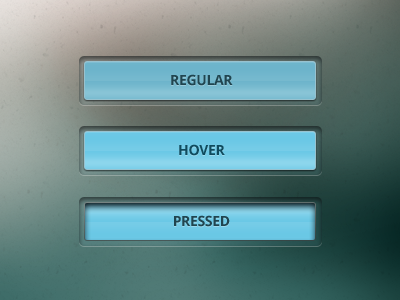
<style>
.page{position:relative;width:400px;height:300px}
.page>*{position:absolute;margin:0}
.t1{font:14px "OpenSans-Bold";letter-spacing:-0.025em;color:#204550;text-transform:uppercase}
.t2{font:14px "OpenSans-Bold";letter-spacing:-0.025em;color:#104b5e;text-transform:uppercase}
</style>
<div class="page">
<p class="t1" style="left:171px;top:74px;width:62px;height:12px">REGULAR</p>
<p class="t2" style="left:179px;top:144px;width:46px;height:12px">HOVER</p>
<p class="t1" style="left:174px;top:215px;width:56px;height:12px">PRESSED</p>
</div>
